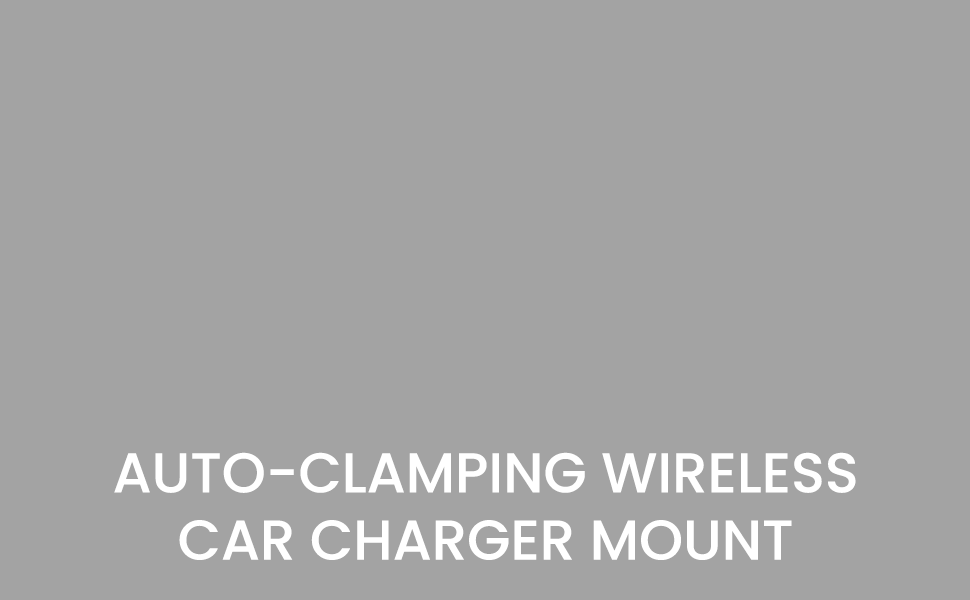
<style>
.page{position:relative;width:970px;height:600px;background:#a3a3a3}
.page>*{position:absolute;margin:0}
.t1{font:56px "Poppins-Medium";color:#ffffff;text-transform:uppercase}
</style>
<div class="page">
<p class="t1" style="left:114px;top:452px;width:742px;height:108px;text-align:center">Auto-clamping Wireless<br>Car Charger Mount</p>
</div>
